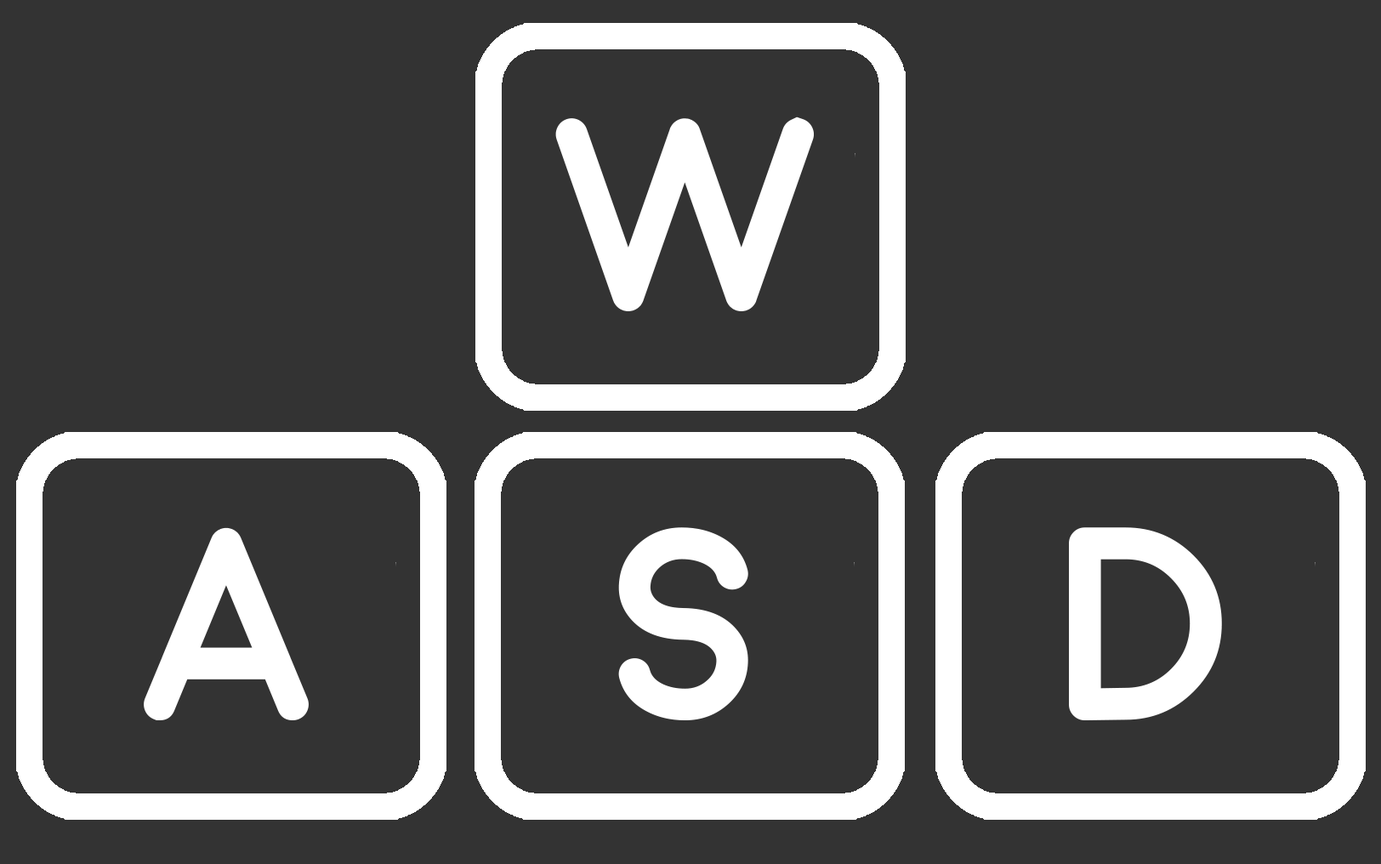
<style>
.page{position:relative;width:1381px;height:864px;background:#333333}
.page>*{position:absolute;margin:0}
.t1{font:275.4px "Moon-Bold";color:#ffffff}
</style>
<div class="page">
<p class="t1" style="left:555px;top:116px;width:259px;height:195px">W</p>
<p class="t1" style="left:144px;top:527px;width:165px;height:193px">A</p>
<p class="t1" style="left:618px;top:527px;width:130px;height:193px">S</p>
<p class="t1" style="left:1069px;top:527px;width:153px;height:193px">D</p>
</div>
